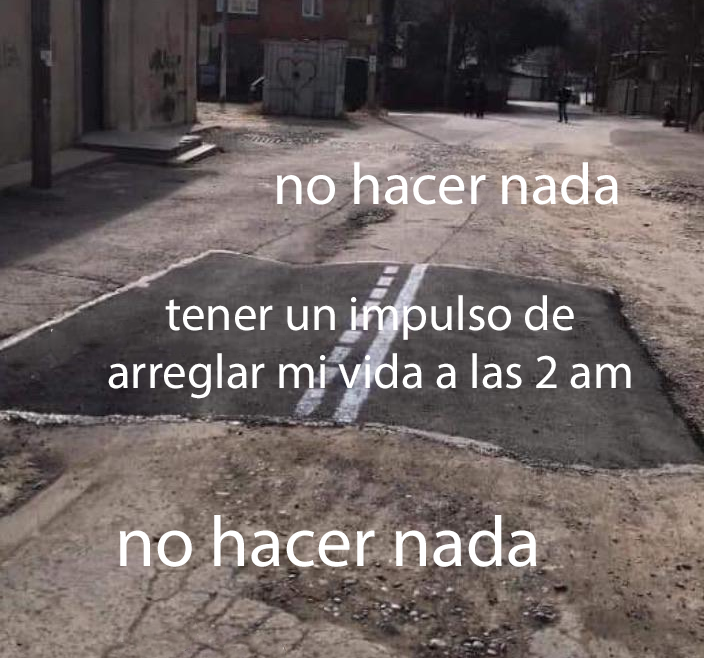
<style>
.page{position:relative;width:704px;height:658px}
.page>*{position:absolute;margin:0}
.t1{font:58.8px "MyriadPro-Regular";color:#ffffff}
.t2{font:49px "MyriadPro-Regular";color:#ffffff}
.t3{font:72px "MyriadPro-Regular";color:#ffffff}
</style>
<div class="page">
<p class="t1" style="left:277px;top:162px;width:341px;height:43px">no hacer nada</p>
<p class="t2" style="left:108px;top:295px;width:523px;height:104px;text-align:center">tener un impulso de<br>arreglar mi vida a las 2 am</p>
<p class="t3" style="left:120px;top:515px;width:417px;height:52px">no hacer nada</p>
</div>
